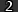
<style>
.page{position:relative;width:18px;height:12px;background:#333333}
.page>*{position:absolute;margin:0}
.t1{font:17px "Perpetua-Bold";color:#ffffff}
</style>
<div class="page">
<p class="t1" style="left:5px;top:1px;width:8px;height:10px">2</p>
</div>
